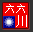
<style>
.page{position:relative;width:33px;height:32px;background:#f20000}
.page>*{position:absolute;margin:0}
.t1{font:10.4px "SimSun";color:#ffffff}
.t2{font:11.7px "SimSun";color:#ffffff}
</style>
<div class="page">
<p class="t1" style="left:5px;top:4px;width:20px;height:9px">六六</p>
<p class="t2" style="left:16px;top:15px;width:11px;height:12px">川</p>
</div>
